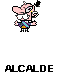
<style>
.page{position:relative;width:58px;height:72px;background:#ffffff}
.page>*{position:absolute;margin:0}
.t1{font:10.3px "Arial-BoldMT";color:#000000;scale:1.11 1}
</style>
<div class="page">
<p class="t1" style="left:5px;top:65px;width:48px;height:7px">ALCALDE</p>
</div>
